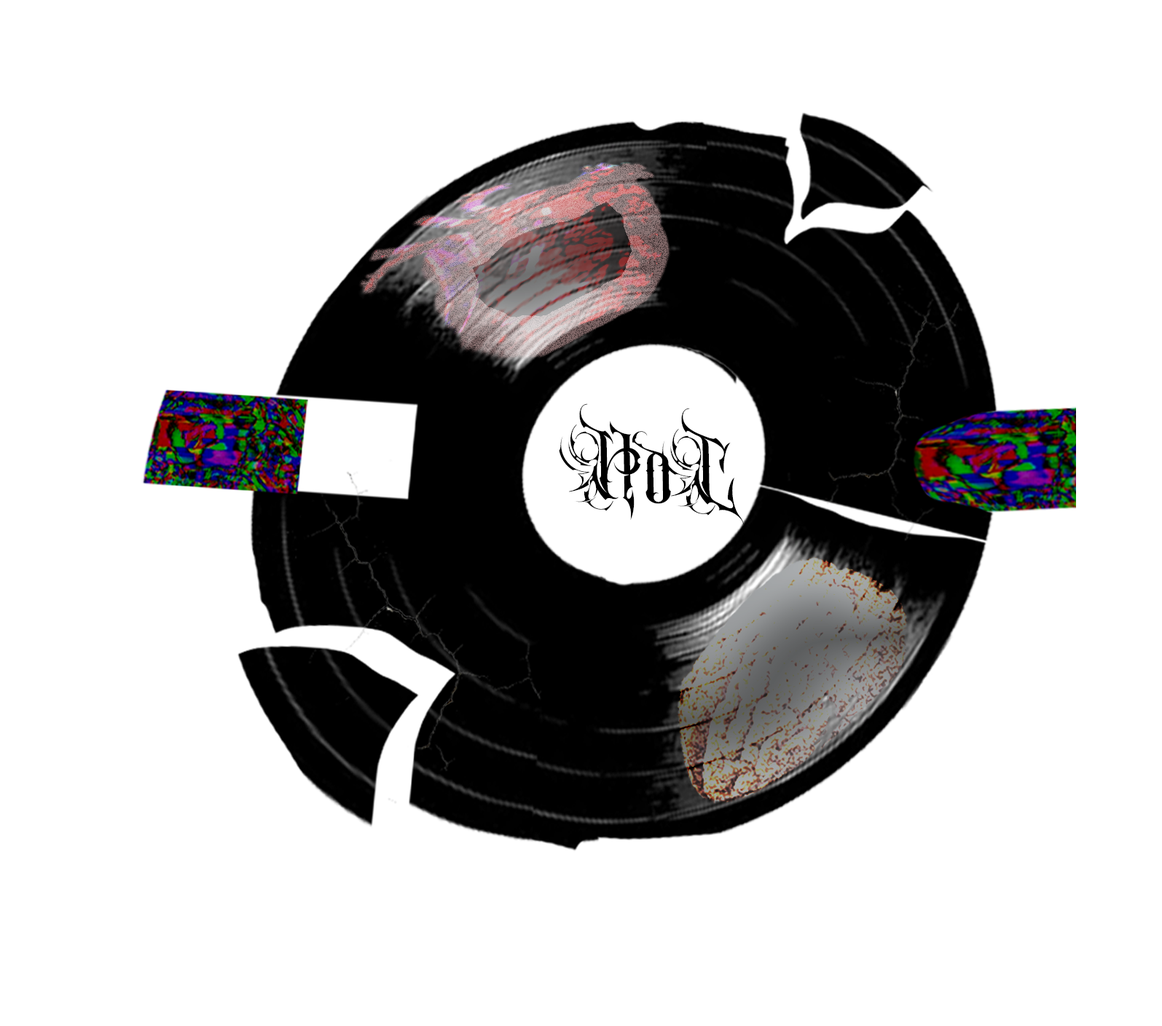
<style>
.page{position:relative;width:1162px;height:1026px;background:#ffffff}
.page>*{position:absolute;margin:0}
.t1{font:69.4px "QueenlordPersonaluse-Regular";color:#000000}
</style>
<div class="page">
<p class="t1" style="left:559px;top:404px;width:82px;height:116px;rotate:-1deg">H</p>
<p class="t1" style="left:661px;top:408px;width:83px;height:117px;rotate:-1deg">C</p>
<p class="t1" style="left:632px;top:431px;width:39px;height:73px;rotate:-1deg">o</p>
</div>
